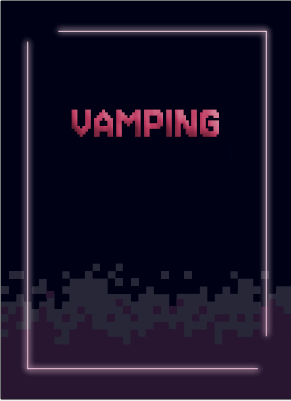
<style>
.page{position:relative;width:291px;height:401px;background:#000115}
.page>*{position:absolute;margin:0}
.t1{font:50px "Jersey10-Regular";letter-spacing:0.025em}
</style>
<div class="page">
<p class="t1" style="left:71px;top:109px;width:148px;height:28px">VAMPING</p>
</div>
